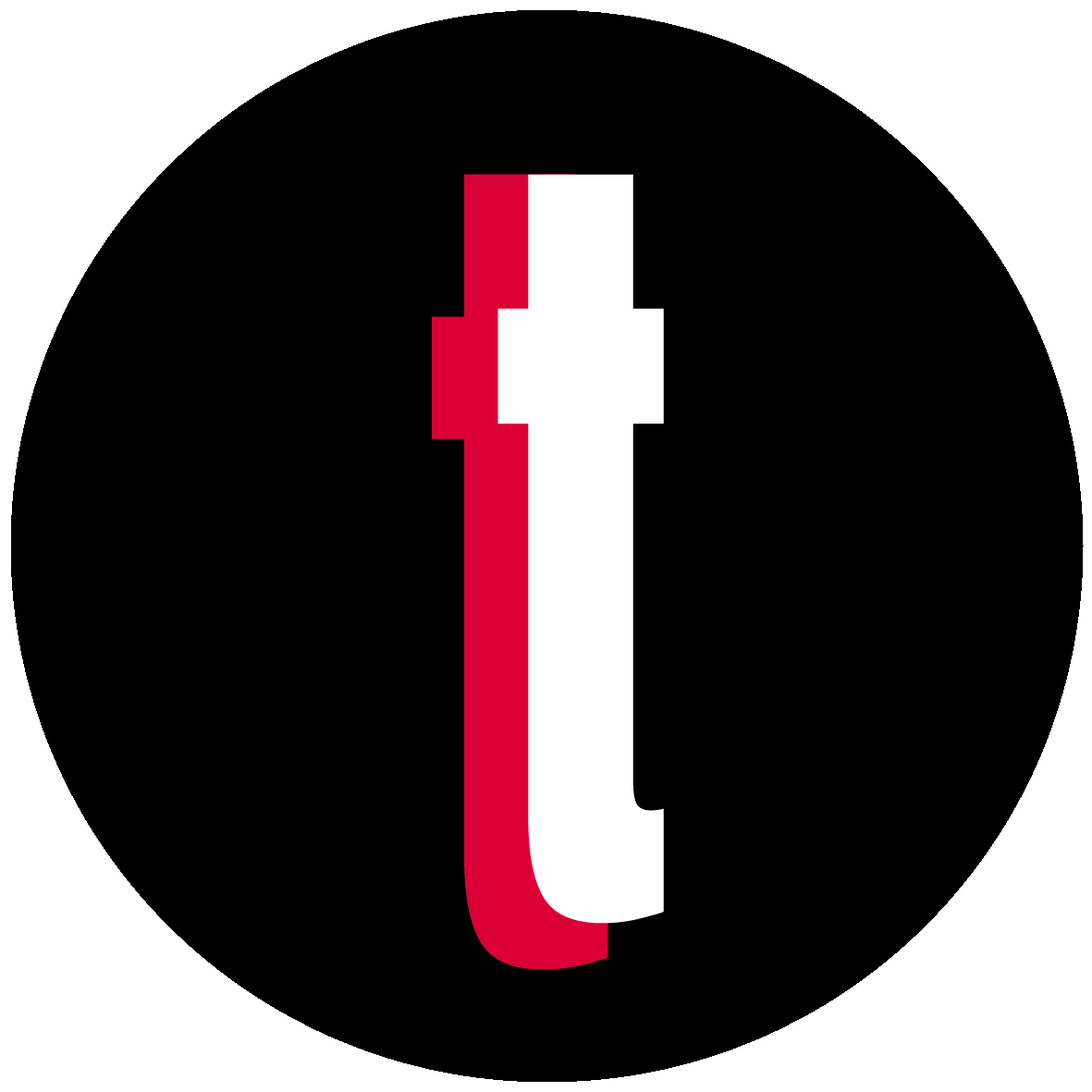
<style>
.page{position:relative;width:1092px;height:1092px;background:#000000}
.page>*{position:absolute;margin:0}
.t1{font:916.9px "Anton-Regular";scale:0.71 1}
.t2{font:863px "Anton-Regular";color:#ffffff;scale:0.71 1}
</style>
<div class="page">
<p class="t1" style="left:432px;top:174px;width:176px;height:796px">t</p>
<p class="t2" style="left:497px;top:174px;width:167px;height:750px">t</p>
</div>
